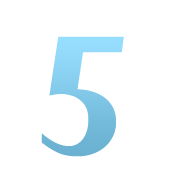
<style>
.page{position:relative;width:192px;height:192px;background:#ffffff}
.page>*{position:absolute;margin:0}
.t1{font:164.4px "PerpetuaTitlingMT-Bold";color:#82c9ea}
</style>
<div class="page">
<p class="t1" style="left:41px;top:36px;width:83px;height:121px">5</p>
</div>
